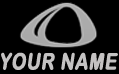
<style>
.page{position:relative;width:119px;height:74px;background:#000000}
.page>*{position:absolute;margin:0}
.t1{font:22.4px "ArialRoundedMTBold";letter-spacing:0.025em;color:#c3c1c1;font-weight:bold;font-style:italic;scale:0.8 1}
</style>
<div class="page">
<p class="t1" style="left:1px;top:52px;width:117px;height:18px">YOUR NAME</p>
</div>
